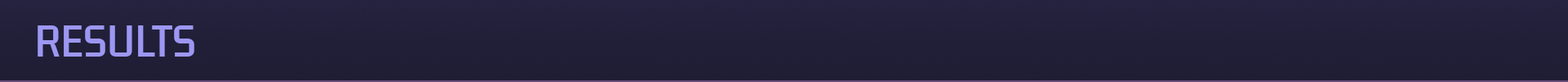
<style>
.page{position:relative;width:1568px;height:82px}
.page>*{position:absolute;margin:0}
.t1{font:39.2px "KdamThmorPro-Regular";color:#9d97f3}
</style>
<div class="page">
<p class="t1" style="left:38px;top:25px;width:156px;height:31px">RESULTS</p>
</div>
